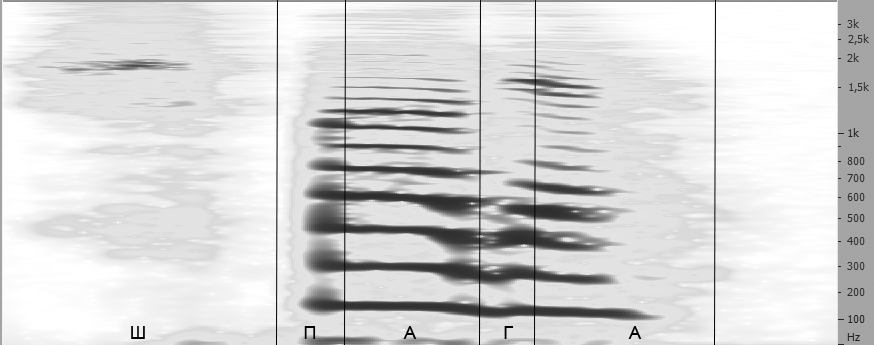
<style>
.page{position:relative;width:874px;height:345px}
.page>*{position:absolute;margin:0}
.t1{font:18px "ArialMT";color:#000000}
</style>
<div class="page">
<p class="t1" style="left:131px;top:326px;width:14px;height:13px">Ш</p>
<p class="t1" style="left:304px;top:326px;width:12px;height:13px">П</p>
<p class="t1" style="left:403px;top:326px;width:14px;height:13px">А</p>
<p class="t1" style="left:504px;top:326px;width:10px;height:13px">Г</p>
<p class="t1" style="left:628px;top:326px;width:14px;height:13px">А</p>
</div>
